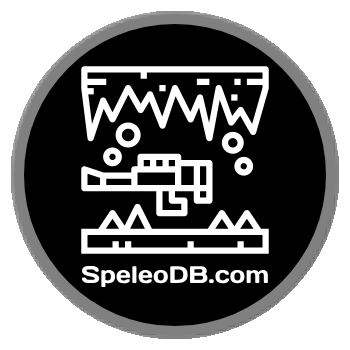
<style>
.page{position:relative;width:350px;height:350px;background:#000000}
.page>*{position:absolute;margin:0}
.t1{font:24px "Days";color:#ffffff}
</style>
<div class="page">
<p class="t1" style="left:81px;top:266px;width:187px;height:21px">SpeleoDB.com</p>
</div>
